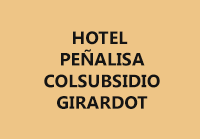
<style>
.page{position:relative;width:200px;height:139px;background:#eec586}
.page>*{position:absolute;margin:0}
.t1{font:18px "SegoeUI-Bold";color:#141414}
</style>
<div class="page">
<p class="t1" style="left:44px;top:31px;width:116px;height:78px;text-align:center">HOTEL <br>PEÑALISA<br>COLSUBSIDIO<br>GIRARDOT</p>
</div>
